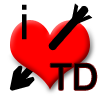
<style>
.page{position:relative;width:100px;height:100px;background:#ffffff}
.page>*{position:absolute;margin:0}
.t1{font:48px "ArialMT";color:#000000}
.t2{font:45.4px "ArialMT";color:#000000;scale:0.79 1}
.t3{font:36px "ArialMT";color:#000000}
</style>
<div class="page">
<p class="t1" style="left:22px;top:4px;width:5px;height:36px">i</p>
<p class="t2" style="left:71px;top:3px;width:22px;height:23px;rotate:130deg">&gt;</p>
<p class="t3" style="left:50px;top:63px;width:47px;height:27px">TD</p>
</div>
